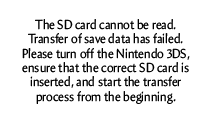
<style>
.page{position:relative;width:212px;height:122px;background:#ffffff}
.page>*{position:absolute;margin:0}
.t1{font:13.2px "Amira-Roman";color:#000000;scale:0.91 1}
</style>
<div class="page">
<p class="t1" style="left:22px;top:19px;width:168px;height:85px;text-align:center">The SD card cannot be read. <br>Transfer of save data has failed. <br>Please turn off the Nintendo 3DS, <br>ensure that the correct SD card is <br>inserted, and start the transfer <br>process from the beginning.</p>
</div>
